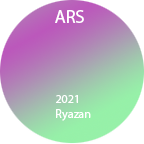
<style>
.page{position:relative;width:144px;height:144px;background:#ffffff}
.page>*{position:absolute;margin:0}
.t1{font:18px "MyriadPro-Regular";color:#ffffff}
.t2{font:12px "MyriadPro-Regular";color:#ffffff}
</style>
<div class="page">
<p class="t1" style="left:55px;top:10px;width:29px;height:13px">ARS</p>
<p class="t2" style="left:56px;top:95px;width:35px;height:26px">2021<br>Ryazan</p>
</div>
